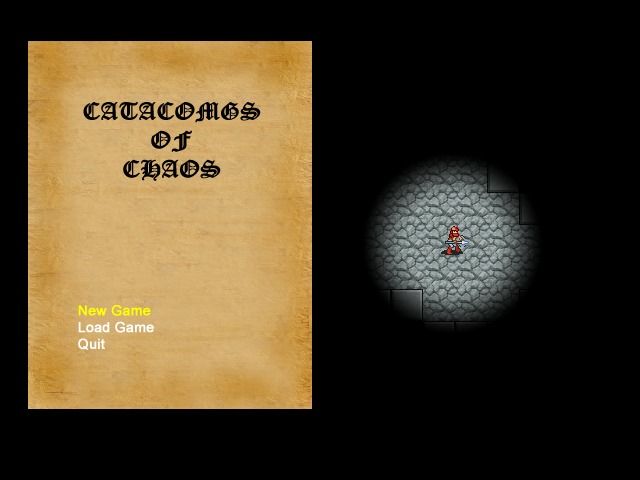
<style>
.page{position:relative;width:640px;height:480px;background:#000000}
.page>*{position:absolute;margin:0}
.t1{font:24px "OldEnglishTextMT";color:#000000;font-weight:bold}
.t2{font:14px "ArialMT";color:#ffffff;font-weight:bold}
.t3{font:14px "ArialMT";color:#ffff00;font-weight:bold}
</style>
<div class="page">
<p class="t1" style="left:83px;top:102px;width:178px;height:79px;text-align:center">CATACOMGS<br>OF<br>CHAOS</p>
<p class="t2" style="left:78px;top:305px;width:76px;height:45px"><span class="t3">New Game<br></span>Load Game<br>Quit</p>
</div>
